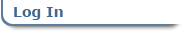
<style>
.page{position:relative;width:191px;height:32px;background:#ffffff}
.page>*{position:absolute;margin:0}
.t1{font:14px "Verdana-Bold";color:#42688e}
</style>
<div class="page">
<p class="t1" style="left:14px;top:7px;width:49px;height:13px">Log In</p>
</div>
